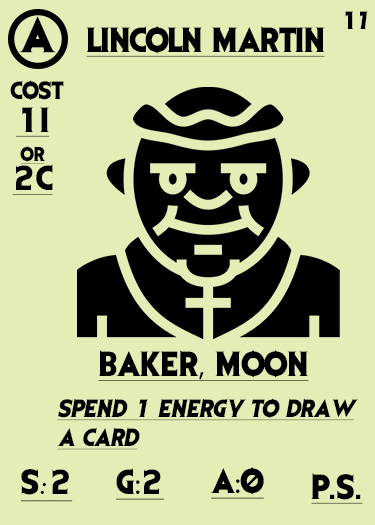
<style>
.page{position:relative;width:375px;height:525px;background:#e3edb5}
.page>*{position:absolute;margin:0}
.t1{font:41.7px "EvilDead";letter-spacing:-0.05em;color:#000000}
.t2{font:20.8px "EvilDead";letter-spacing:-0.1em;color:#000000}
.t3{font:29.2px "EvilDead";letter-spacing:-0.025em;color:#000000;text-decoration:underline}
.t4{font:20.8px "EvilDead";color:#000000}
.t5{font:29.2px/29.2px "EvilDead";color:#000000;text-decoration:underline}
.t6{font:16.7px/29.2px "EvilDead";color:#000000;text-decoration:underline}
.t7{font:29.2px "EvilDead";color:#000000;text-decoration:underline}
.t8{font:29.2px "MyriadPro-Regular";color:#000000;text-decoration:underline}
.t9{font:20.8px/29.2px "EvilDead";color:#000000;font-style:italic;text-decoration:underline}
.t10{font:29.2px "Fadli-Script";color:#000000;text-decoration:underline}
</style>
<div class="page">
<p class="t1" style="left:19px;top:16px;width:37px;height:37px">A</p>
<p class="t2" style="left:345px;top:11px;width:23px;height:18px">17</p>
<p class="t3" style="left:86px;top:26px;width:239px;height:31px">LINCOLN MARTIN</p>
<p class="t4" style="left:10px;top:80px;width:54px;height:20px">COST</p>
<p class="t5" style="left:12px;top:107px;width:41px;height:88px;text-align:center">1I<br><span class="t6">or<br></span>2C</p>
<p class="t7" style="left:98px;top:350px;width:211px;height:31px">BAKER<span class="t8">,</span> MOON</p>
<p class="t9" style="left:57px;top:398px;width:301px;height:52px">Spend 1 energy to draw<br>A card</p>
<p class="t7" style="left:21px;top:469px;width:52px;height:33px">S<span class="t10">:</span>2</p>
<p class="t7" style="left:116px;top:468px;width:49px;height:32px">G<span class="t8">:</span>2</p>
<p class="t7" style="left:210px;top:467px;width:54px;height:32px">A<span class="t8">:</span>0</p>
<p class="t7" style="left:311px;top:473px;width:52px;height:31px">P.S.</p>
</div>
